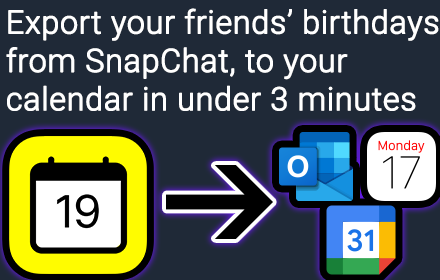
<style>
.page{position:relative;width:440px;height:280px;background:#1f2937}
.page>*{position:absolute;margin:0}
.t1{font:32px "Roboto-Light";color:#ffffff;font-weight:bold}
</style>
<div class="page">
<p class="t1" style="left:6px;top:8px;width:433px;height:103px">Export your friends’ birthdays from SnapChat, to your calendar in under 3 minutes</p>
</div>
